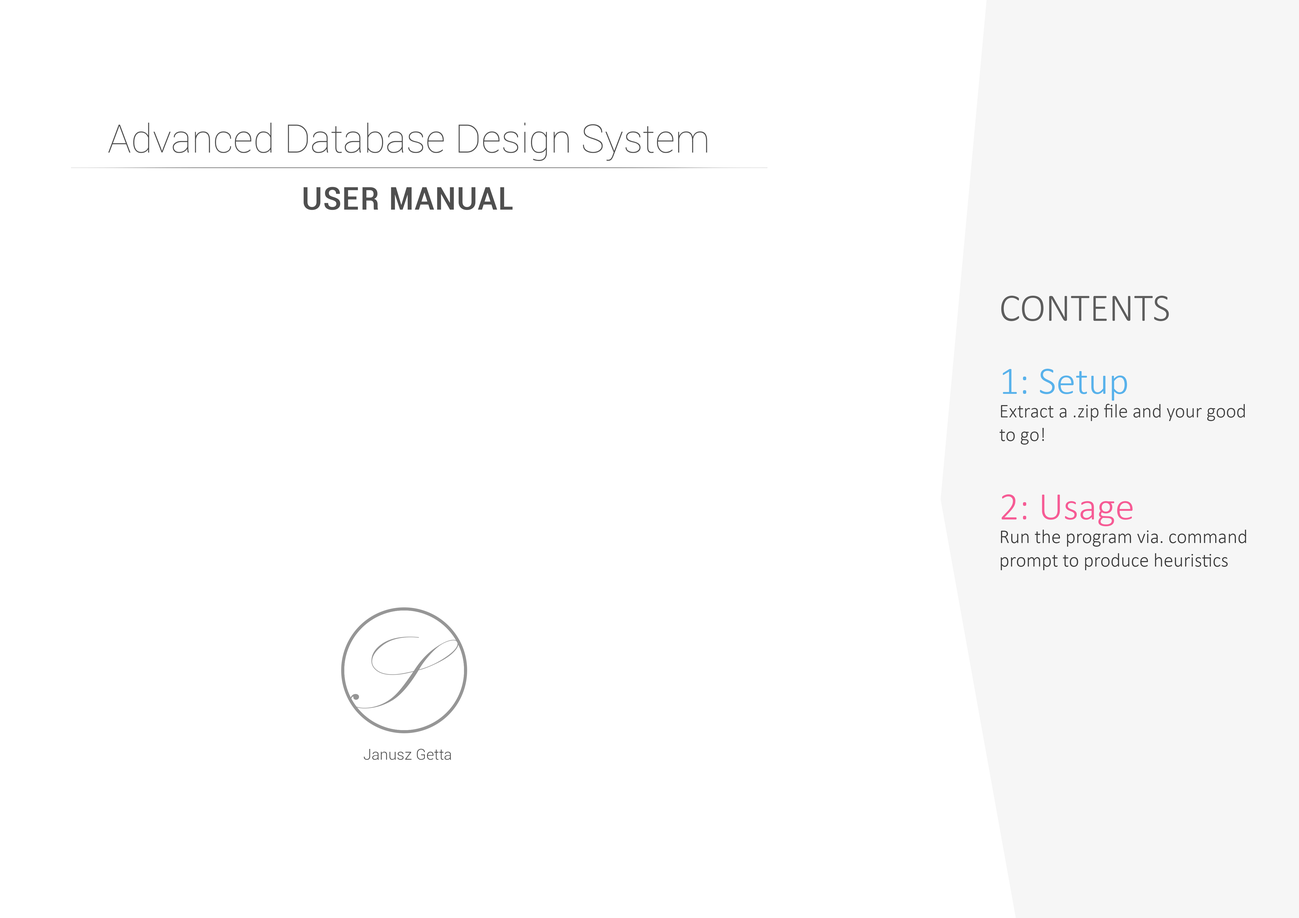
<style>
.page{position:relative;width:1299px;height:918px;background:#ffffff}
.page>*{position:absolute;margin:0}
.t1{font:39.3px "Roboto-Thin";color:#4f4f4f}
.t2{font:39.3px "Roboto-Condensed";color:#4f4f4f;font-variant:small-caps}
.t3{font:39.3px "Calibri-Light";color:#5d5d5d;text-transform:uppercase}
.t4{font:19.6px "Calibri-Light";color:#3a3a3a}
.t5{font:39.3px "Calibri-Light";color:#58b2eb}
.t6{font:19.6px "Calibri-Light";color:#404040}
.t7{font:39.3px "Calibri-Light";color:#f65b95}
.t8{font:15.3px "Roboto-Light";color:#4f4f4f}
</style>
<div class="page">
<p class="t1" style="left:108px;top:123px;width:599px;height:38px">Advanced Database Design System</p>
<p class="t2" style="left:303px;top:187px;width:210px;height:23px">user manual</p>
<p class="t3" style="left:1001px;top:296px;width:167px;height:25px">contents</p>
<p class="t4" style="left:999px;top:369px;width:247px;height:201px"><span class="t5">1: Setup<br></span><span class="t6">Extract a .zip file and your good to go!<br><br></span><span class="t7">2: Usage<br></span>Run the program via. command prompt to produce heuristics</p>
<p class="t8" style="left:364px;top:749px;width:87px;height:11px">Janusz Getta</p>
</div>
